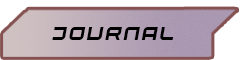
<style>
.page{position:relative;width:250px;height:60px;background:#ffffff}
.page>*{position:absolute;margin:0}
.t1{font:18px "UnitedKingdom";letter-spacing:0.13em;color:#000000;font-style:italic}
</style>
<div class="page">
<p class="t1" style="left:52px;top:27px;width:122px;height:13px">Journal</p>
</div>
